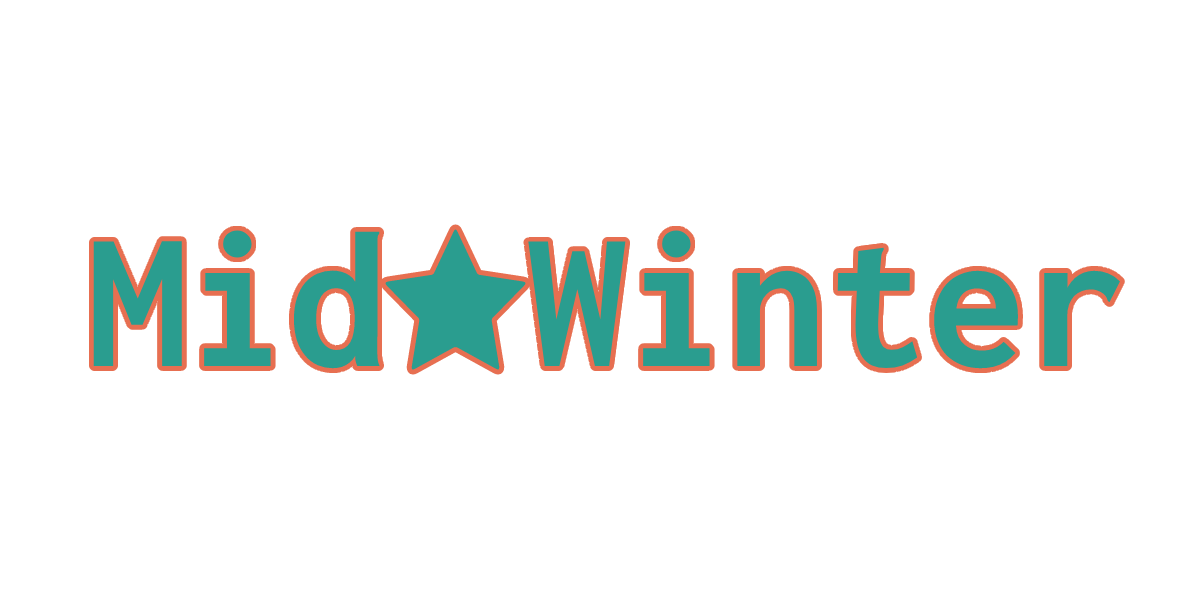
<style>
.page{position:relative;width:1200px;height:600px;background:#ffffff}
.page>*{position:absolute;margin:0}
.t1{font:200px "Inconsolata-Bold";color:#2a9d8f}
</style>
<div class="page">
<p class="t1" style="left:93px;top:230px;width:287px;height:139px">Mid</p>
<p class="t1" style="left:528px;top:230px;width:592px;height:139px">Winter</p>
</div>
